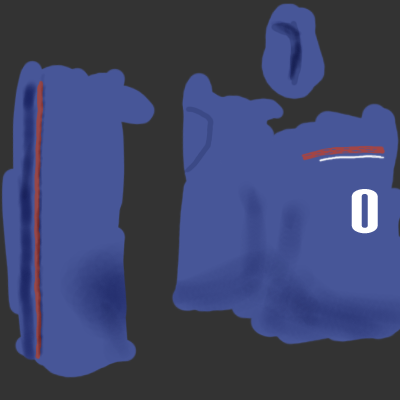
<style>
.page{position:relative;width:400px;height:400px;background:#333333}
.page>*{position:absolute;margin:0}
.t1{font:71.7px "CarbonBlock";color:#ffffff}
</style>
<div class="page">
<p class="t1" style="left:351px;top:189px;width:27px;height:45px">0</p>
</div>
